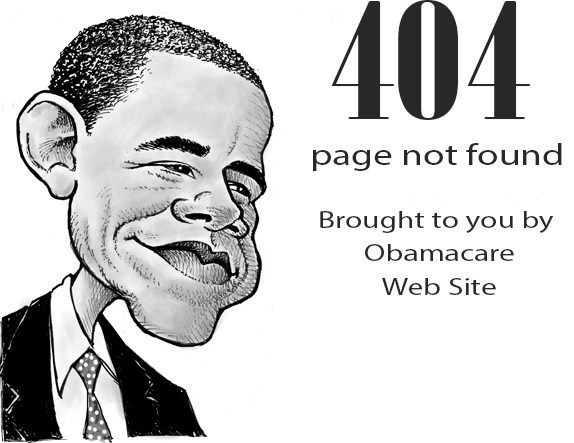
<style>
.page{position:relative;width:574px;height:443px;background:#ffffff}
.page>*{position:absolute;margin:0}
.t1{font:160px "Onyx";color:#282828;scale:1.51 1}
.t2{font:30px "MyriadPro-Regular";color:#282828;scale:1.31 1}
.t3{font:24px "MyriadPro-Regular";color:#282828;scale:1.31 1}
</style>
<div class="page">
<p class="t1" style="left:331px;top:0px;width:200px;height:120px">404</p>
<p class="t2" style="left:312px;top:143px;width:250px;height:28px">page not found</p>
<p class="t3" style="left:320px;top:211px;width:234px;height:84px;text-align:center">Brought to you by <br>Obamacare<br>Web Site</p>
</div>
